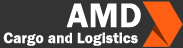
<style>
.page{position:relative;width:183px;height:48px;background:#333333}
.page>*{position:absolute;margin:0}
.t1{font:35.3px "FranklinGothic-Demi";letter-spacing:0.005em;color:#ffffff}
.t2{font:15.4px "FranklinGothic-Demi";letter-spacing:0.005em;color:#ffffff}
</style>
<div class="page">
<p class="t1" style="left:66px;top:3px;width:75px;height:25px">AMD</p>
<p class="t2" style="left:3px;top:32px;width:135px;height:14px">Cargo and Logistics</p>
</div>
